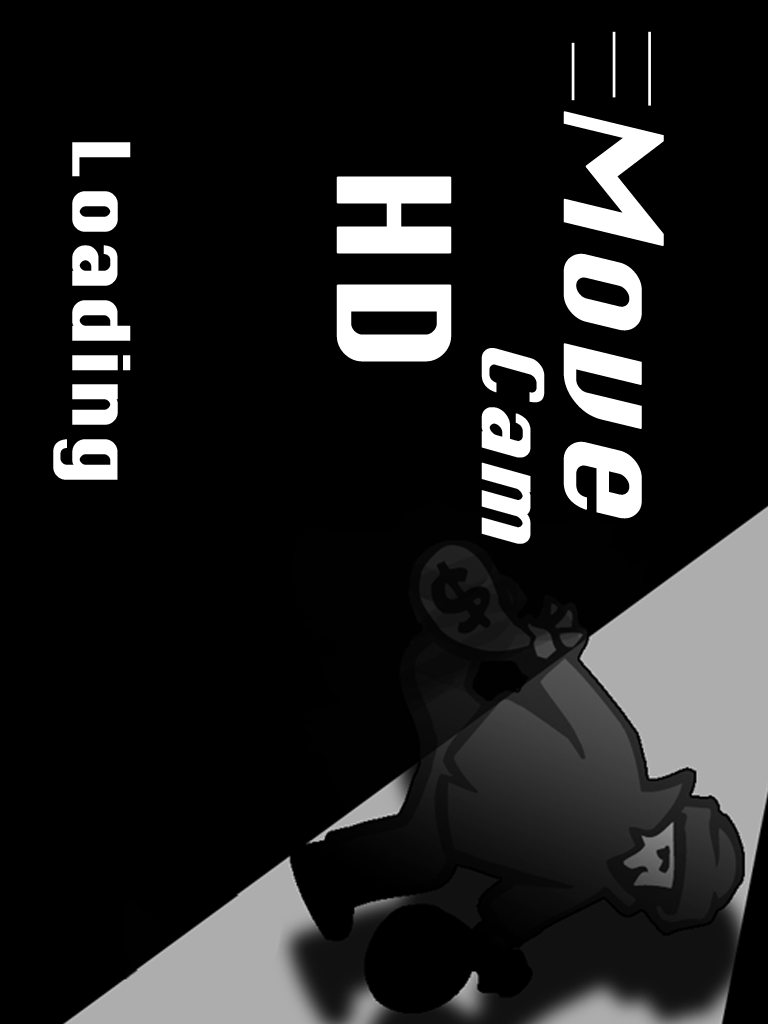
<style>
.page{position:relative;width:768px;height:1024px;background:#000000}
.page>*{position:absolute;margin:0}
.t1{font:135px "Krungthep";letter-spacing:0.025em;color:#ffffff;font-weight:bold}
.t2{font:76.1px "Krungthep";letter-spacing:0.025em;color:#ffffff;font-weight:bold}
.t3{font:150px "Krungthep";letter-spacing:0.025em;color:#ffffff;font-weight:bold}
.t4{font:85.1px "Krungthep";letter-spacing:0.025em;color:#ffffff;font-weight:bold;scale:0.96 1}
</style>
<div class="page">
<p class="t1" style="left:563px;top:111px;width:101px;height:408px;rotate:90deg">Move</p>
<p class="t2" style="left:53px;top:142px;width:78px;height:338px;rotate:90deg">Loading</p>
<p class="t3" style="left:336px;top:176px;width:116px;height:186px;rotate:90deg">HD</p>
<p class="t4" style="left:481px;top:348px;width:64px;height:196px;rotate:90deg">Cam</p>
</div>
